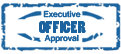
<style>
.page{position:relative;width:121px;height:54px;background:#ffffff}
.page>*{position:absolute;margin:0}
.t1{font:9px "Shruti-Bold";color:#1b639e}
.t2{font:16px "PoplarStd";color:#1b639e}
</style>
<div class="page">
<p class="t1" style="left:43px;top:10px;width:38px;height:8px">Executive</p>
<p class="t1" style="left:43px;top:10px;width:38px;height:8px">Executive</p>
<p class="t2" style="left:39px;top:21px;width:47px;height:12px">OFFICER</p>
<p class="t2" style="left:39px;top:21px;width:47px;height:12px">OFFICER</p>
<p class="t1" style="left:44px;top:34px;width:35px;height:9px">Approval</p>
<p class="t1" style="left:44px;top:34px;width:35px;height:9px">Approval</p>
</div>
